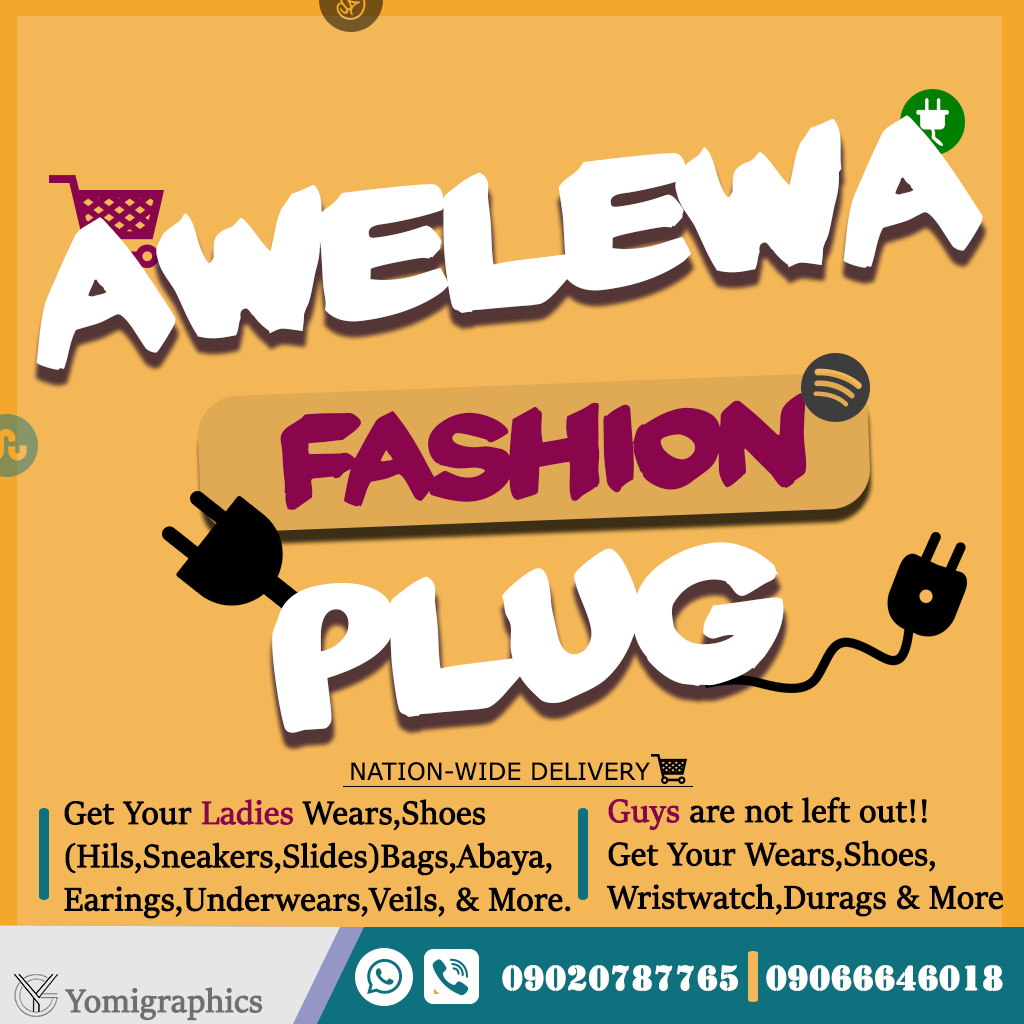
<style>
.page{position:relative;width:1024px;height:1024px;background:#f4b757}
.page>*{position:absolute;margin:0}
.t1{font:186.2px "YardSale";color:#ffffff}
.t2{font:120px "YardSale";color:#89064d}
.t3{font:24px "Verdana";color:#000000}
.t4{font:36px "SitkaBanner";color:#000000;font-weight:bold}
.t5{font:36px "SitkaBanner";color:#89064d;font-weight:bold}
.t6{font:36px "Stencil";color:#ffffff;font-weight:bold}
.t7{font:36px "SitkaBanner";color:#6f6f6f;font-weight:bold}
</style>
<div class="page">
<p class="t1" style="left:36px;top:115px;width:947px;height:255px;rotate:-7deg">AWELEWA</p>
<p class="t2" style="left:280px;top:393px;width:527px;height:117px;rotate:-2deg">FASHION</p>
<p class="t1" style="left:272px;top:542px;width:512px;height:191px;rotate:-7deg">Plug</p>
<p class="t3" style="left:351px;top:762px;width:299px;height:19px">NATION-WIDE DELIVERY</p>
<p class="t4" style="left:606px;top:797px;width:397px;height:120px"><span class="t5">Guys</span> are not left out!!<br>Get Your Wears,Shoes,<br>Wristwatch,Durags &amp; More</p>
<p class="t4" style="left:64px;top:799px;width:507px;height:120px">Get Your <span class="t5">Ladies </span>Wears,Shoes<br>(Hils,Sneakers,Slides)Bags,Abaya,<br>Earings,Underwears,Veils, &amp; More.</p>
<p class="t6" style="left:502px;top:965px;width:236px;height:26px">09020787765</p>
<p class="t6" style="left:766px;top:965px;width:237px;height:26px">09066646018</p>
<p class="t7" style="left:65px;top:987px;width:198px;height:34px">Yomigraphics</p>
</div>
